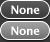
<style>
.page{position:relative;width:50px;height:42px}
.page>*{position:absolute;margin:0}
.t1{font:11.5px "LucidaGrande-Bold";letter-spacing:-0.025em;color:#ffffff}
</style>
<div class="page">
<p class="t1" style="left:11px;top:5px;width:29px;height:9px">None</p>
<p class="t1" style="left:11px;top:26px;width:29px;height:9px">None</p>
</div>
